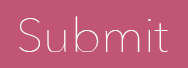
<style>
.page{position:relative;width:188px;height:68px;background:#c15576}
.page>*{position:absolute;margin:0}
.t1{font:48px "AvenirNext-UltraLight";color:#fcfbfb}
</style>
<div class="page">
<p class="t1" style="left:19px;top:16px;width:149px;height:36px">Submit</p>
</div>
